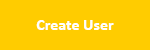
<style>
.page{position:relative;width:150px;height:50px;background:#ffcc00}
.page>*{position:absolute;margin:0}
.t1{font:16px "Calibri-Bold";color:#ffffff}
</style>
<div class="page">
<p class="t1" style="left:36px;top:20px;width:78px;height:10px">Create User</p>
</div>
